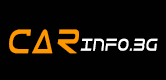
<style>
.page{position:relative;width:166px;height:80px;background:#010101}
.page>*{position:absolute;margin:0}
.t1{font:15.1px "Tele-Marines";letter-spacing:0.1em;color:#ffffff;font-weight:bold;font-style:italic;scale:0.71 1}
.t2{font:30.2px "Tele-Marines";letter-spacing:0.1em;color:#ff9700;font-weight:bold;font-style:italic;scale:0.71 1}
</style>
<div class="page">
<p class="t1" style="left:9px;top:29px;width:149px;height:25px"><span class="t2">Car</span>Info.bg</p>
</div>
